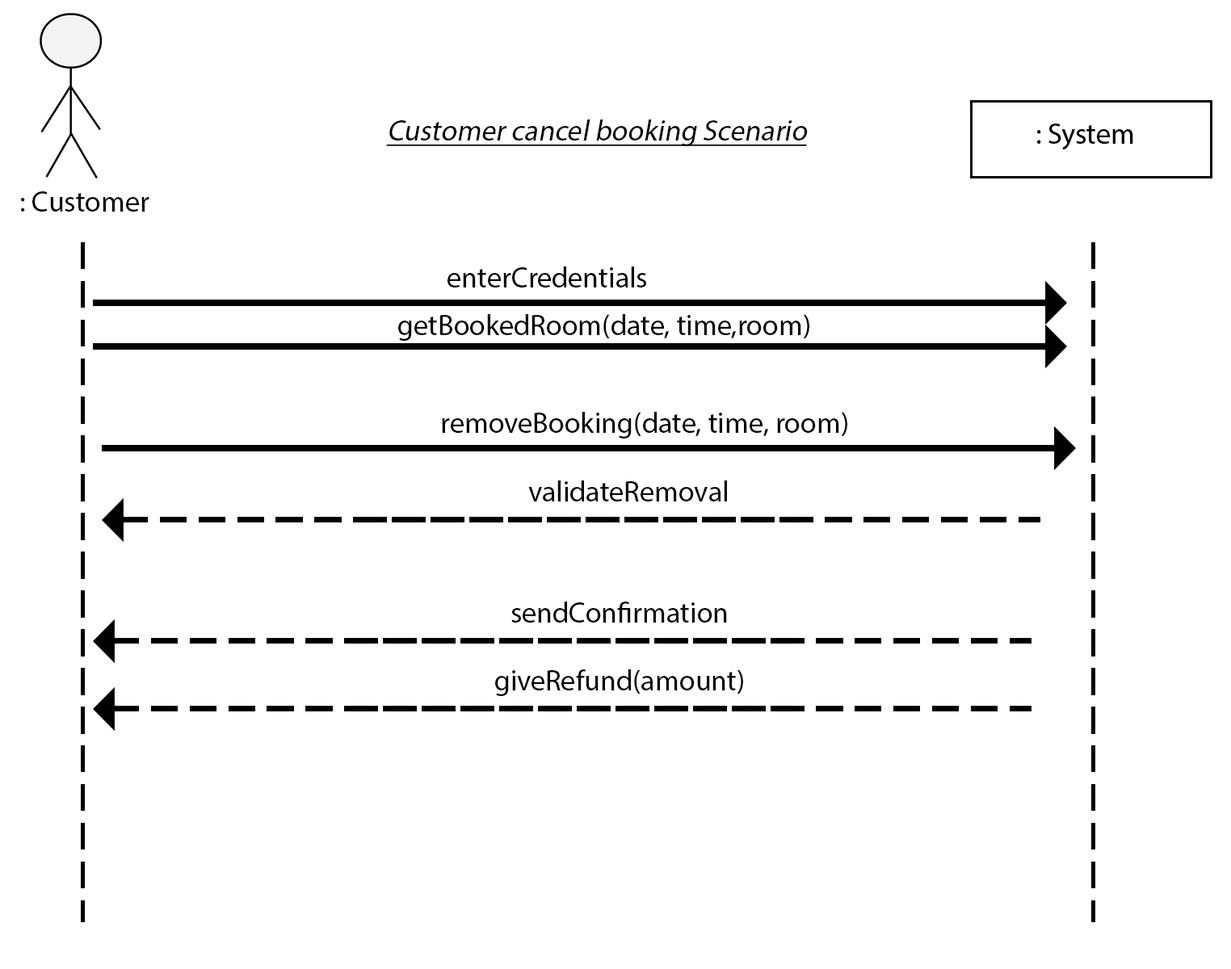
<style>
.page{position:relative;width:1231px;height:969px;background:#ffffff}
.page>*{position:absolute;margin:0}
.t1{font:29.1px "MyriadPro-Regular";color:#000000;font-style:italic;text-decoration:underline}
.t2{font:29.1px "MyriadPro-Regular";color:#000000}
</style>
<div class="page">
<p class="t1" style="left:386px;top:120px;width:421px;height:26px">Customer cancel booking Scenario</p>
<p class="t2" style="left:21px;top:191px;width:128px;height:21px">: Customer</p>
<p class="t2" style="left:447px;top:266px;width:199px;height:21px">enterCredentials</p>
<p class="t2" style="left:398px;top:314px;width:411px;height:27px">getBookedRoom(date, time,room)</p>
<p class="t2" style="left:442px;top:412px;width:405px;height:26px">removeBooking(date, time, room)</p>
<p class="t2" style="left:528px;top:480px;width:199px;height:21px">validateRemoval</p>
<p class="t2" style="left:511px;top:602px;width:216px;height:21px">sendConfirmation</p>
<p class="t2" style="left:495px;top:669px;width:248px;height:27px">giveRefund(amount)</p>
</div>
